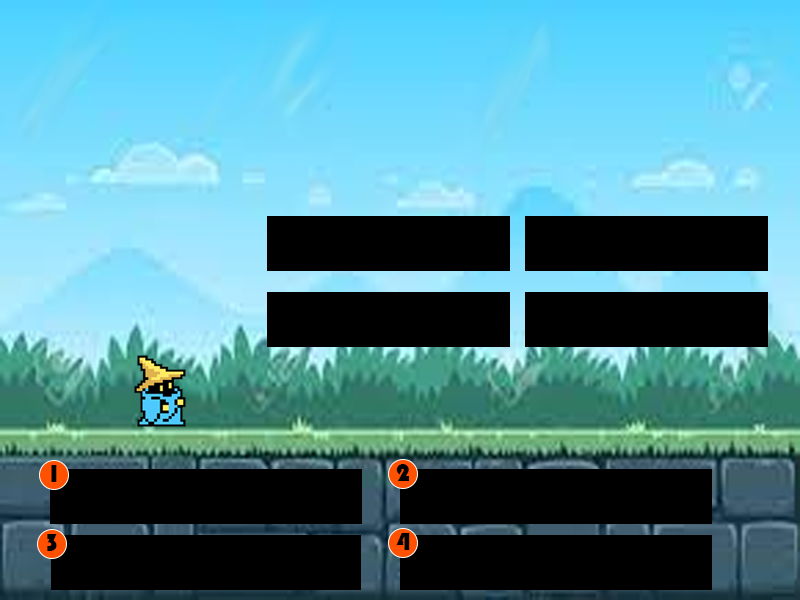
<style>
.page{position:relative;width:800px;height:600px;background:#000000}
.page>*{position:absolute;margin:0}
.t1{font:26px "Bauhaus93";color:#000000;font-variant:small-caps}
</style>
<div class="page">
<p class="t1" style="left:51px;top:465px;width:6px;height:17px">1</p>
<p class="t1" style="left:396px;top:464px;width:13px;height:17px">2</p>
<p class="t1" style="left:47px;top:534px;width:10px;height:17px">3</p>
<p class="t1" style="left:396px;top:533px;width:14px;height:17px">4</p>
</div>
